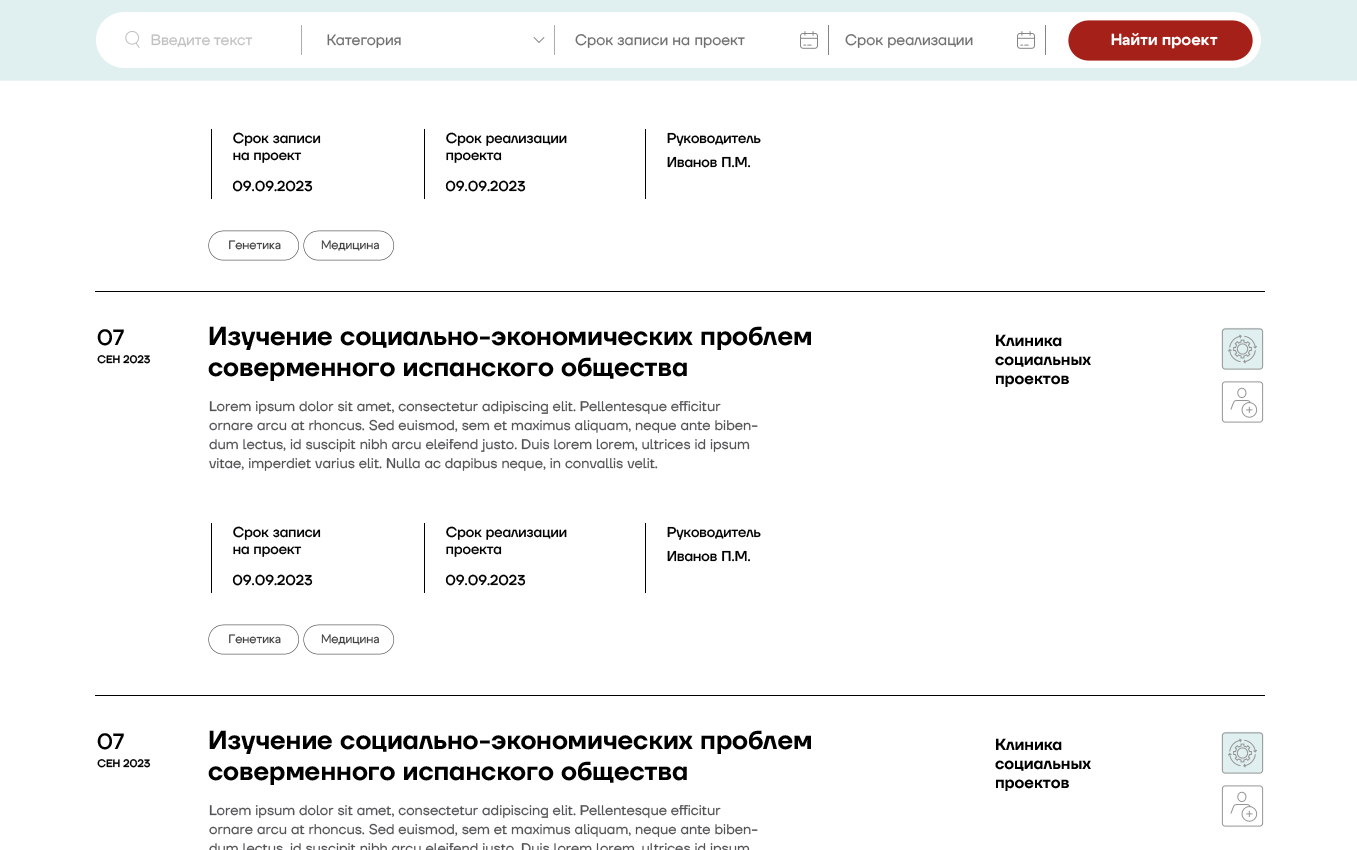
<style>
.page{position:relative;width:1357px;height:850px;background:#ffffff}
.page>*{position:absolute;margin:0}
.t1{font:15px "TTFirsNeue-Regular";color:#c2c2c2}
.t2{font:15px "TTFirsNeue-Regular";color:#707070}
.t3{font:16px "Cygre-Bold";color:#ffffff}
.t4{font:14.2px "TTFirsNeue-Medium";color:#000000}
.t5{font:14.2px/24px "TTFirsNeue-Medium";color:#000000}
.t6{font:12px "Cygre-Regular";color:#414141}
.t7{font:22.1px "TTFirsNeue-Medium";color:#000000}
.t8{font:26px "TTFirsNeue-DemiBold";color:#000000}
.t9{font:16px "TTFirsNeue-DemiBold";color:#000000}
.t10{font:10.8px "TTFirsNeue-Medium";color:#000000}
.t11{font:14px/19px "TTFirsNeue-Regular";color:#545456}
</style>
<div class="page">
<p class="t1" style="left:151px;top:34px;width:102px;height:13px">Введите текст</p>
<p class="t2" style="left:327px;top:34px;width:74px;height:14px">Категория</p>
<p class="t2" style="left:575px;top:34px;width:170px;height:14px">Срок записи на проект</p>
<p class="t2" style="left:845px;top:34px;width:128px;height:14px">Срок реализации</p>
<p class="t3" style="left:1111px;top:32px;width:107px;height:17px">Найти проект</p>
<p class="t4" style="left:233px;top:132px;width:88px;height:31px">Срок записи<br>на проект</p>
<p class="t4" style="left:446px;top:132px;width:121px;height:31px">Срок реализации<br>проекта</p>
<p class="t4" style="left:667px;top:132px;width:94px;height:36px">Руководитель<br><span class="t5">Иванов П.М.</span></p>
<p class="t4" style="left:232px;top:180px;width:81px;height:12px">09.09.2023</p>
<p class="t4" style="left:445px;top:180px;width:81px;height:12px">09.09.2023</p>
<p class="t6" style="left:229px;top:240px;width:52px;height:10px">Генетика</p>
<p class="t6" style="left:321px;top:240px;width:58px;height:11px">Медицина</p>
<p class="t7" style="left:97px;top:329px;width:27px;height:17px">07</p>
<p class="t8" style="left:208px;top:326px;width:603px;height:55px">Изучение социально-экономических проблем соверменного испанского общества</p>
<p class="t9" style="left:995px;top:334px;width:96px;height:53px">Клиника<br>социальных<br>проектов</p>
<p class="t10" style="left:97px;top:355px;width:54px;height:9px">СЕН 2023</p>
<p class="t11" style="left:209px;top:401px;width:549px;height:70px">Lorem ipsum dolor sit amet, consectetur adipiscing elit. Pellentesque efficitur ornare arcu at rhoncus. Sed euismod, sem et maximus aliquam, neque ante bibendum lectus, id suscipit nibh arcu eleifend justo. Duis lorem lorem, ultrices id ipsum vitae, imperdiet varius elit. Nulla ac dapibus neque, in convallis velit.</p>
<p class="t4" style="left:233px;top:526px;width:88px;height:31px">Срок записи<br>на проект</p>
<p class="t4" style="left:446px;top:526px;width:121px;height:31px">Срок реализации<br>проекта</p>
<p class="t4" style="left:667px;top:526px;width:94px;height:36px">Руководитель<br><span class="t5">Иванов П.М.</span></p>
<p class="t4" style="left:232px;top:574px;width:81px;height:12px">09.09.2023</p>
<p class="t4" style="left:445px;top:574px;width:81px;height:12px">09.09.2023</p>
<p class="t6" style="left:229px;top:634px;width:52px;height:10px">Генетика</p>
<p class="t6" style="left:321px;top:634px;width:58px;height:11px">Медицина</p>
<p class="t7" style="left:97px;top:733px;width:27px;height:17px">07</p>
<p class="t8" style="left:208px;top:730px;width:603px;height:55px">Изучение социально-экономических проблем соверменного испанского общества</p>
<p class="t9" style="left:995px;top:738px;width:96px;height:53px">Клиника<br>социальных<br>проектов</p>
<p class="t10" style="left:97px;top:759px;width:54px;height:9px">СЕН 2023</p>
</div>
